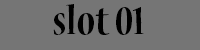
<style>
.page{position:relative;width:200px;height:50px;background:#757575}
.page>*{position:absolute;margin:0}
.t1{font:44px "NuevaStd-BoldCond";color:#000000}
</style>
<div class="page">
<p class="t1" style="left:53px;top:4px;width:91px;height:31px">slot 01</p>
</div>
